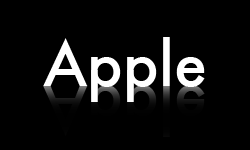
<style>
.page{position:relative;width:250px;height:150px;background:#000000}
.page>*{position:absolute;margin:0}
.t1{font:60px "Futura-Medium";color:#ffffff}
</style>
<div class="page">
<p class="t1" style="left:43px;top:37px;width:162px;height:65px">Apple</p>
</div>
